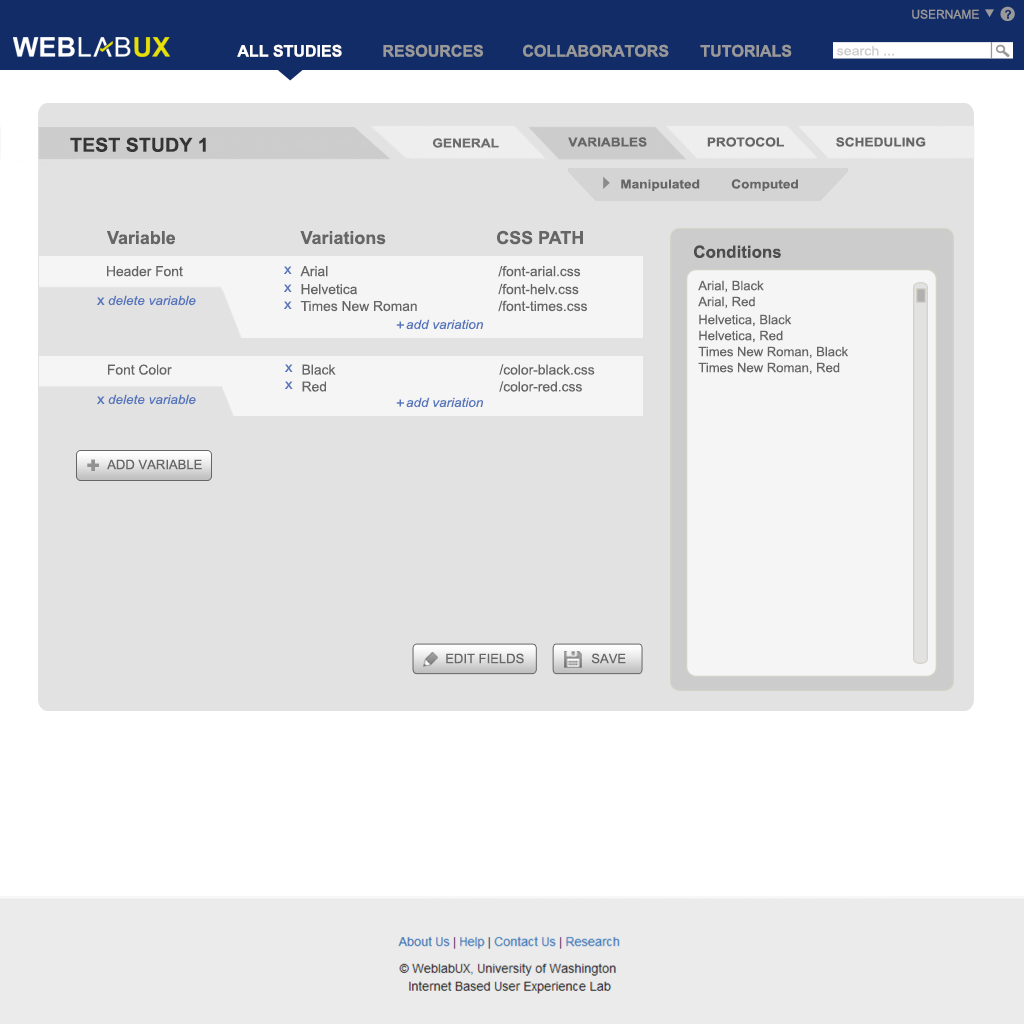
<style>
.page{position:relative;width:1024px;height:1024px;background:#e2e2e2}
.page>*{position:absolute;margin:0}
.t1{font:12px "ArialMT";color:#999999}
.t2{font:12px "Arial-BoldMT";color:#122c67}
.t3{font:16px "Arial-BoldMT";color:#ffffff}
.t4{font:16px "Arial-BoldMT";color:#999999}
.t5{font:16px "Arial-BoldMT";color:#989898}
.t6{font:12.9px "ArialMT";color:#cccccc;scale:1.1 1}
.t7{font:19.2px "Arial-BoldMT";color:#353535}
.t8{font:12.4px "Arial-BoldMT";color:#666666;scale:1.1 1}
.t9{font:12.4px "Arial-BoldMT";color:#6d6d6d;scale:1.1 1}
.t10{font:17.8px "Arial-BoldMT";color:#666666}
.t11{font:16.9px "Arial-BoldMT";color:#4d4d4d}
.t12{font:13.8px "ArialMT";color:#666666}
.t13{font:14px "ArialMT";color:#5474bb;scale:1.07 1}
.t14{font:13.1px "ArialMT";color:#666666}
.t15{font:12.7px "Arial-ItalicMT";color:#5474bb;scale:1.07 1}
.t16{font:21.4px "Arial-Black";color:#929292}
</style>
<div class="page">
<p class="t1" style="left:912px;top:9px;width:67px;height:10px">USERNAME</p>
<p class="t2" style="left:1004px;top:9px;width:8px;height:10px">?</p>
<p class="t3" style="left:237px;top:44px;width:105px;height:13px">ALL STUDIES</p>
<p class="t4" style="left:383px;top:44px;width:100px;height:13px">RESOURCES</p>
<p class="t5" style="left:523px;top:44px;width:146px;height:13px">COLLABORATORS</p>
<p class="t4" style="left:700px;top:44px;width:92px;height:13px">TUTORIALS</p>
<p class="t6" style="left:837px;top:46px;width:57px;height:10px">search ...</p>
<p class="t7" style="left:70px;top:137px;width:136px;height:15px">TEST STUDY 1</p>
<p class="t8" style="left:568px;top:137px;width:79px;height:10px">VARIABLES</p>
<p class="t8" style="left:707px;top:137px;width:77px;height:10px">PROTOCOL</p>
<p class="t8" style="left:836px;top:137px;width:90px;height:10px">SCHEDULING</p>
<p class="t9" style="left:432px;top:138px;width:67px;height:10px">GENERAL</p>
<p class="t8" style="left:621px;top:179px;width:79px;height:12px">Manipulated</p>
<p class="t8" style="left:731px;top:179px;width:67px;height:12px">Computed</p>
<p class="t10" style="left:107px;top:231px;width:68px;height:14px">Variable</p>
<p class="t10" style="left:300px;top:231px;width:86px;height:14px">Variations</p>
<p class="t10" style="left:497px;top:230px;width:86px;height:15px">CSS PATH</p>
<p class="t11" style="left:694px;top:245px;width:87px;height:13px">Conditions</p>
<p class="t12" style="left:107px;top:266px;width:76px;height:11px">Header Font</p>
<p class="t13" style="left:284px;top:266px;width:8px;height:8px">x</p>
<p class="t12" style="left:300px;top:266px;width:28px;height:11px">Arial</p>
<p class="t12" style="left:498px;top:266px;width:83px;height:11px">/font-arial.css</p>
<p class="t14" style="left:698px;top:280px;width:66px;height:13px">Arial, Black</p>
<p class="t13" style="left:284px;top:284px;width:8px;height:8px">x</p>
<p class="t12" style="left:301px;top:284px;width:56px;height:11px">Helvetica</p>
<p class="t12" style="left:498px;top:283px;width:81px;height:12px">/font-helv.css</p>
<p class="t13" style="left:97px;top:297px;width:8px;height:8px">x</p>
<p class="t15" style="left:108px;top:295px;width:88px;height:11px">delete variable</p>
<p class="t13" style="left:284px;top:301px;width:8px;height:8px">x</p>
<p class="t12" style="left:300px;top:301px;width:117px;height:11px">Times New Roman</p>
<p class="t12" style="left:498px;top:300px;width:89px;height:12px">/font-times.css</p>
<p class="t14" style="left:698px;top:296px;width:57px;height:13px">Arial, Red</p>
<p class="t14" style="left:699px;top:314px;width:93px;height:13px">Helvetica, Black</p>
<p class="t13" style="left:396px;top:321px;width:8px;height:8px">+</p>
<p class="t15" style="left:406px;top:319px;width:77px;height:11px">add variation</p>
<p class="t14" style="left:699px;top:330px;width:84px;height:13px">Helvetica, Red</p>
<p class="t14" style="left:698px;top:346px;width:151px;height:13px">Times New Roman, Black</p>
<p class="t12" style="left:108px;top:364px;width:64px;height:11px">Font Color</p>
<p class="t13" style="left:285px;top:364px;width:8px;height:8px">x</p>
<p class="t12" style="left:302px;top:364px;width:34px;height:11px">Black</p>
<p class="t12" style="left:499px;top:364px;width:96px;height:11px">/color-black.css</p>
<p class="t14" style="left:698px;top:362px;width:142px;height:13px">Times New Roman, Red</p>
<p class="t13" style="left:285px;top:381px;width:8px;height:8px">x</p>
<p class="t12" style="left:302px;top:381px;width:24px;height:11px">Red</p>
<p class="t12" style="left:499px;top:381px;width:83px;height:11px">/color-red.css</p>
<p class="t13" style="left:97px;top:396px;width:8px;height:8px">x</p>
<p class="t15" style="left:108px;top:394px;width:88px;height:11px">delete variable</p>
<p class="t13" style="left:396px;top:399px;width:8px;height:8px">+</p>
<p class="t15" style="left:406px;top:397px;width:77px;height:11px">add variation</p>
<p class="t16" style="left:87px;top:459px;width:12px;height:12px">+</p>
<p class="t14" style="left:107px;top:459px;width:95px;height:11px">ADD VARIABLE</p>
<p class="t14" style="left:446px;top:653px;width:78px;height:11px">EDIT FIELDS</p>
<p class="t14" style="left:591px;top:653px;width:35px;height:11px">SAVE</p>
</div>
